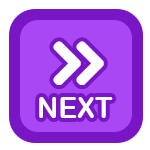
<style>
.page{position:relative;width:150px;height:150px;background:#a847f3}
.page>*{position:absolute;margin:0}
.t1{font:28.8px "ArialRoundedMTBold";letter-spacing:0.025em;color:#ffffff;scale:0.96 1}
</style>
<div class="page">
<p class="t1" style="left:39px;top:97px;width:74px;height:21px">NEXT</p>
</div>
